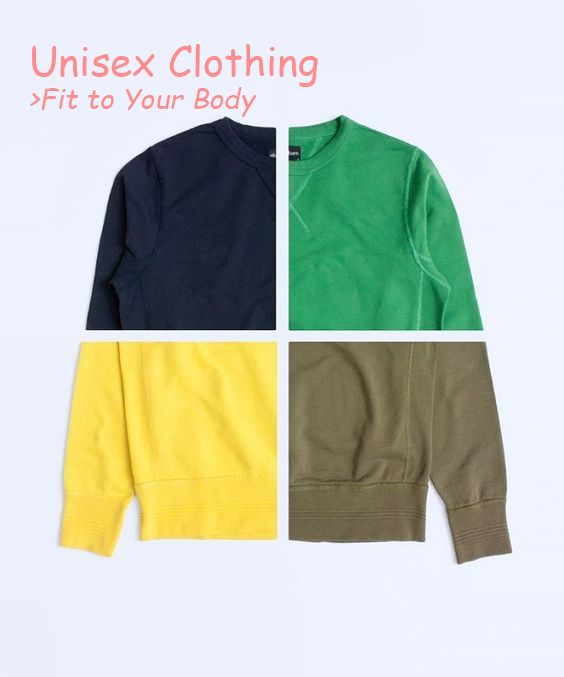
<style>
.page{position:relative;width:564px;height:677px}
.page>*{position:absolute;margin:0}
.t1{font:28px "ComicSansMS-Italic";color:#fd8c8c}
.t2{font:40px "ComicSansMS";color:#fd8c8c}
</style>
<div class="page">
<p class="t1" style="left:30px;top:44px;width:288px;height:73px"><span class="t2">Unisex Clothing<br></span>&gt;Fit to Your Body</p>
</div>
